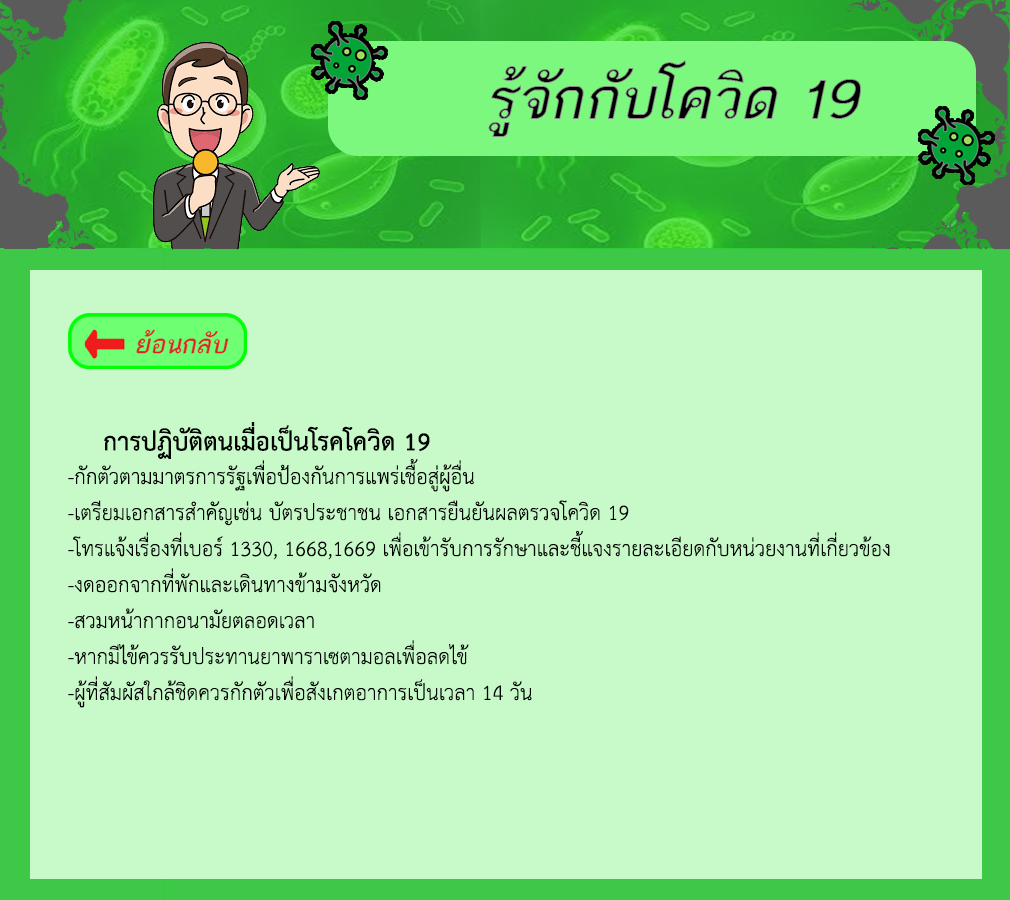
<style>
.page{position:relative;width:1010px;height:900px;background:#c8fac9}
.page>*{position:absolute;margin:0}
.t1{font:36px "THSarabunPSK-Bold";color:#000000}
.t2{font:30px "THSarabunPSK";color:#000000}
</style>
<div class="page">
<p class="t1" style="left:104px;top:422px;width:326px;height:37px">การปฏิบัติตนเมื่อเป็นโรคโควิด 19</p>
<p class="t2" style="left:68px;top:458px;width:822px;height:250px">-กักตัวตามมาตรการรัฐเพื่อป้องกันการแพร่เชื้อสู่ผู้อื่น<br>-เตรียมเอกสารสำคัญเช่น บัตรประชาชน เอกสารยืนยันผลตรวจโควิด 19<br>-โทรแจ้งเรื่องที่เบอร์ 1330, 1668,1669 เพื่อเข้ารับการรักษาและชี้แจงรายละเอียดกับหน่วยงานที่เกี่ยวข้อง<br>-งดออกจากที่พักและเดินทางข้ามจังหวัด<br>-สวมหน้ากากอนามัยตลอดเวลา<br>-หากมีไข้ควรรับประทานยาพาราเซตามอลเพื่อลดไข้<br>-ผู้ที่สัมผัสใกล้ชิดควรกักตัวเพื่อสังเกตอาการเป็นเวลา 14 วัน</p>
</div>
